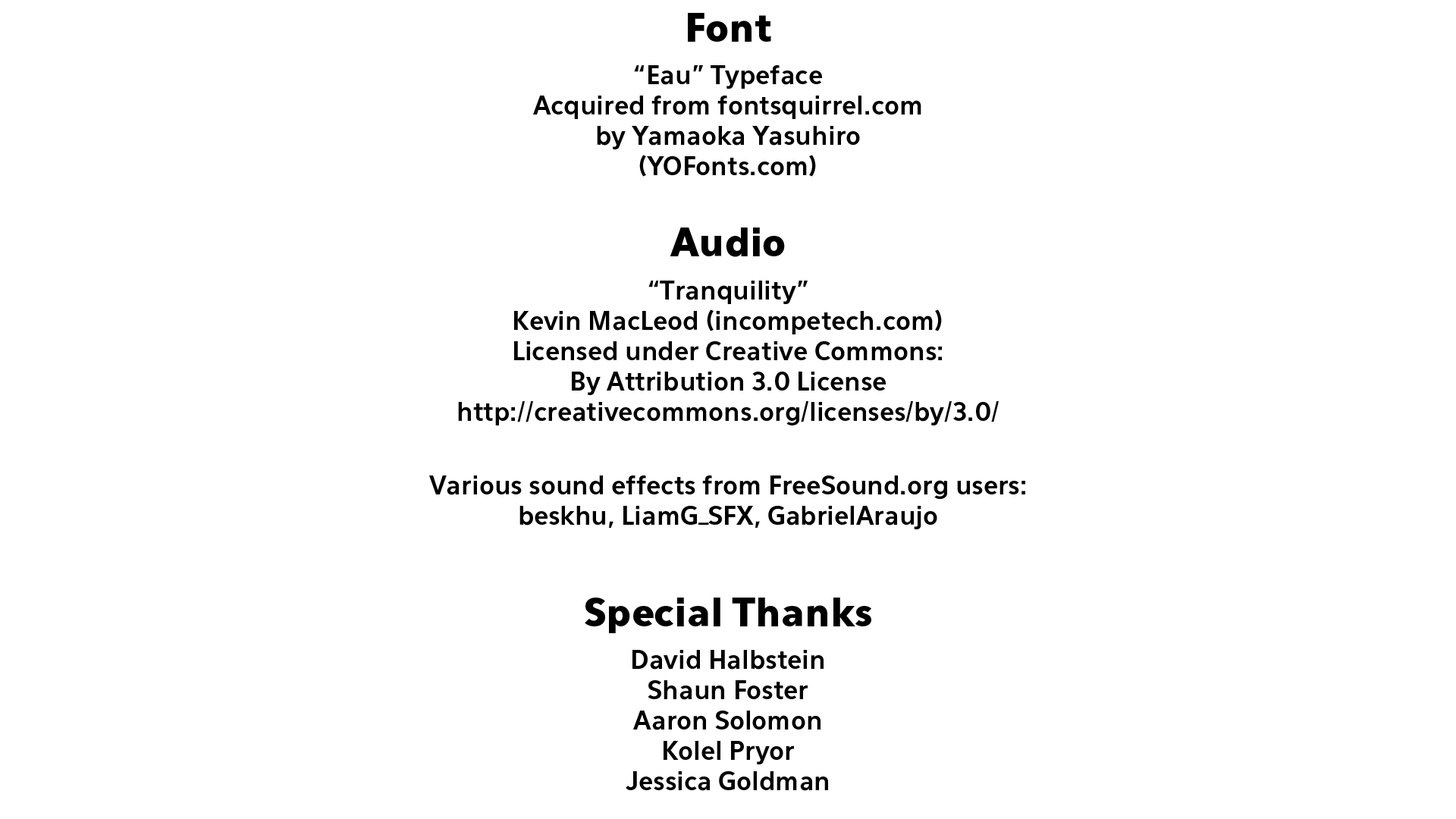
<style>
.page{position:relative;width:1456px;height:819px;background:#ffffff}
.page>*{position:absolute;margin:0}
.t1{font:37.9px "Eau-SansBlack";color:#000000}
.t2{font:25.3px "Eau-SansBold";color:#000000}
</style>
<div class="page">
<p class="t1" style="left:688px;top:13px;width:83px;height:29px">Font</p>
<p class="t2" style="left:533px;top:65px;width:388px;height:112px;text-align:center">“Eau” Typeface<br>Acquired from fontsquirrel.com<br>by Yamaoka Yasuhiro (YOFonts.com)</p>
<p class="t1" style="left:670px;top:227px;width:115px;height:30px">Audio</p>
<p class="t2" style="left:458px;top:281px;width:541px;height:144px;text-align:center">“Tranquility”<br>Kevin MacLeod (incompetech.com)<br>Licensed under Creative Commons: <br>By Attribution 3.0 License<br>http://creativecommons.org/licenses/by/3.0/</p>
<p class="t2" style="left:429px;top:475px;width:596px;height:54px;text-align:center">Various sound effects from FreeSound.org users:<br>beskhu, LiamG_SFX, GabrielAraujo</p>
<p class="t1" style="left:585px;top:598px;width:286px;height:35px">Special Thanks</p>
<p class="t2" style="left:626px;top:650px;width:202px;height:141px;text-align:center">David Halbstein<br>Shaun Foster<br>Aaron Solomon<br>Kolel Pryor<br>Jessica Goldman</p>
</div>
